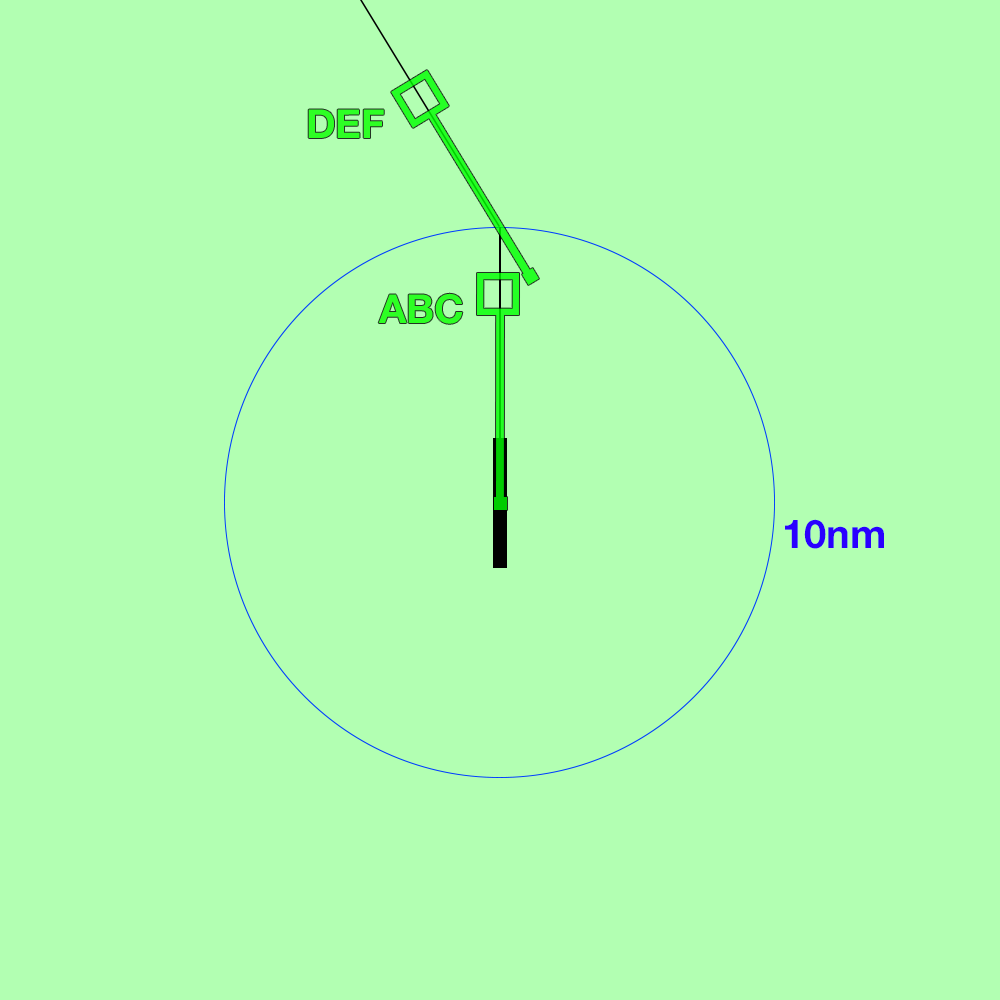
<style>
.page{position:relative;width:1000px;height:1000px;background:#b2ffb2}
.page>*{position:absolute;margin:0}
.t1{font:40px "HelveticaNeue-Bold";color:#2dff24}
.t2{font:40px "HelveticaNeue-Bold";color:#2a00ff}
</style>
<div class="page">
<p class="t1" style="left:308px;top:109px;width:76px;height:29px">DEF</p>
<p class="t1" style="left:378px;top:293px;width:85px;height:31px">ABC</p>
<p class="t2" style="left:785px;top:519px;width:99px;height:30px">10nm</p>
</div>
